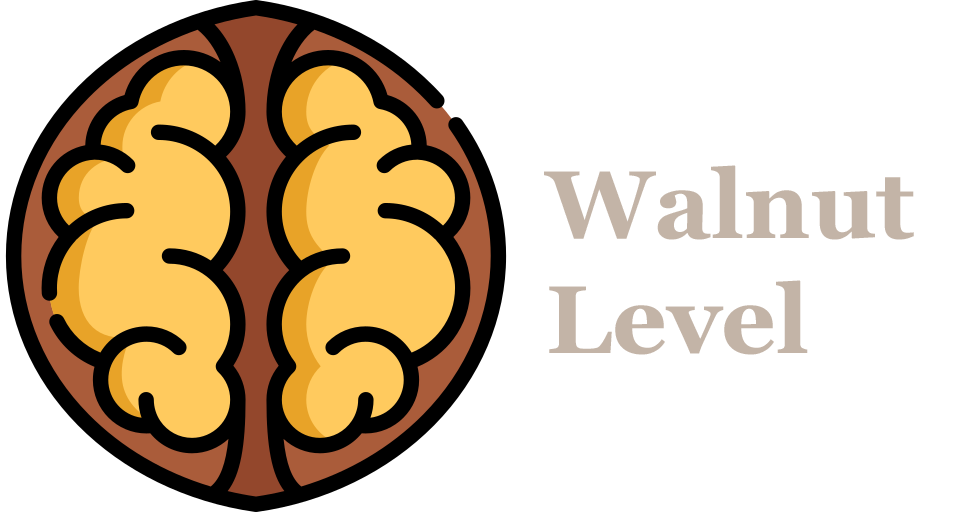
<style>
.page{position:relative;width:980px;height:512px;background:#ffffff}
.page>*{position:absolute;margin:0}
.t1{font:96px "Georgia-Bold";color:#c3b4a7}
</style>
<div class="page">
<p class="t1" style="left:544px;top:165px;width:370px;height:190px">Walnut <br>Level</p>
</div>
